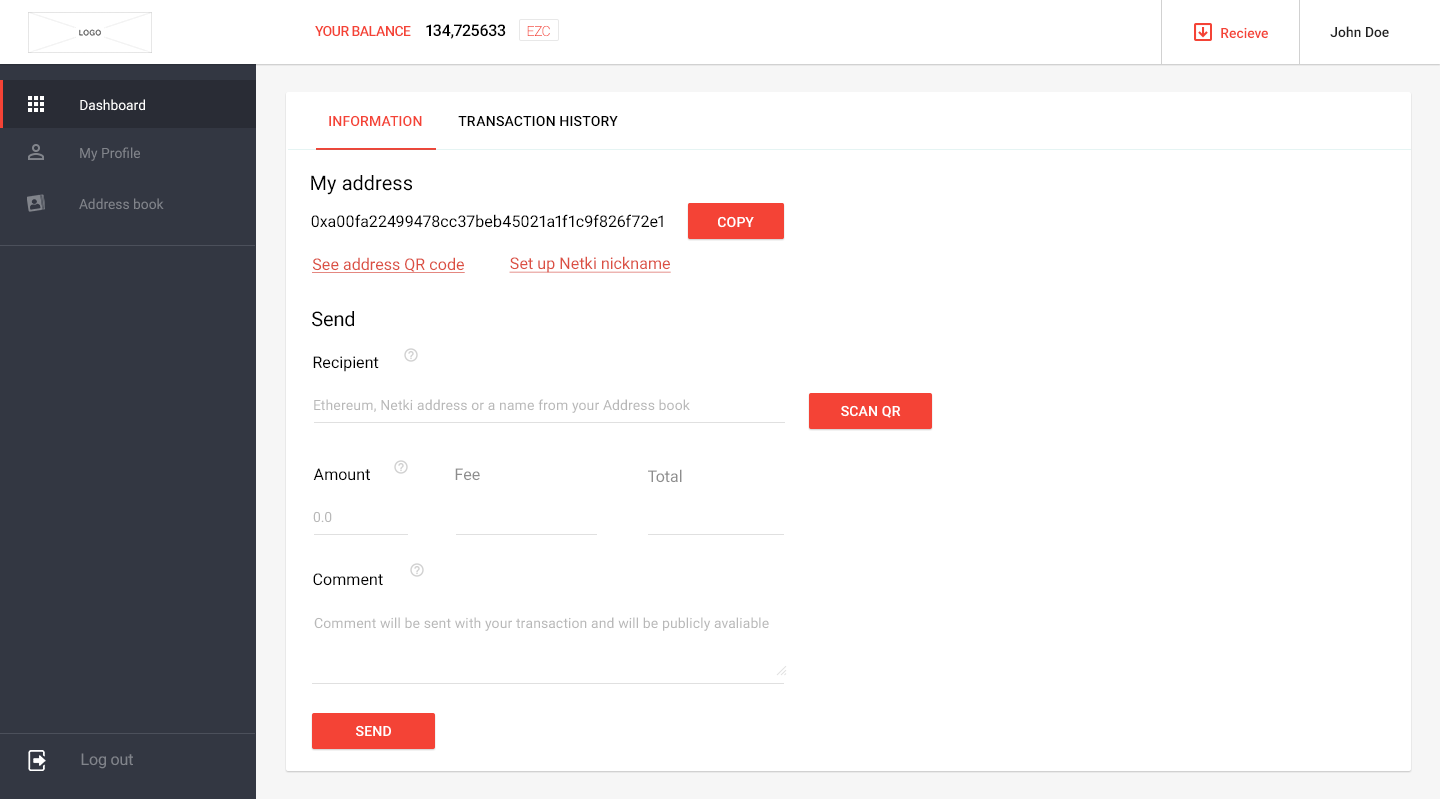
<style>
.page{position:relative;width:1440px;height:799px;background:#ffffff}
.page>*{position:absolute;margin:0}
.t1{font:14px "Roboto-Medium";letter-spacing:-0.04em;color:#f44336;text-transform:uppercase}
.t2{font:16px "Roboto-Medium";letter-spacing:-0.02em;color:#000000}
.t3{font:14px "Roboto-Light";letter-spacing:-0.04em;color:#f44336}
.t4{font:14px "Roboto-Medium";color:#f44336}
.t5{font:14px "Roboto-Medium";color:#212121}
.t6{font:14px "Roboto-Regular";color:#ffffff}
.t7{font:14px "Roboto-Medium";letter-spacing:0.01em;color:#f44336;text-transform:uppercase}
.t8{font:14px "Roboto-Medium";letter-spacing:0.01em;color:#000000;text-transform:uppercase}
.t9{font:14px "Roboto-Regular";color:#81848b}
.t10{font:20px "Roboto-Regular";letter-spacing:0.005em;color:#000000}
.t11{font:16px "Roboto-Regular";letter-spacing:0.005em;color:#000000}
.t12{font:14px "Roboto-Medium";letter-spacing:0.01em;color:#ffffff;text-transform:uppercase}
.t13{font:16px "Roboto-Regular";letter-spacing:0.005em;color:#db4f42;text-decoration:underline}
.t14{font:20px "Roboto-Regular";letter-spacing:-0.01em;color:#000000}
.t15{font:14px "Roboto-Regular";letter-spacing:0.01em;color:#b8b8b8}
.t16{font:16px "Roboto-Regular";letter-spacing:0.005em;color:#8d8d8d}
.t17{font:16px "Roboto-Regular";letter-spacing:-0.011em;color:#81848b}
</style>
<div class="page">
<p class="t1" style="left:315px;top:25px;width:96px;height:12px">Your balance</p>
<p class="t2" style="left:426px;top:24px;width:80px;height:15px">134,725633</p>
<p class="t3" style="left:527px;top:25px;width:23px;height:12px">EZC</p>
<p class="t4" style="left:1221px;top:27px;width:47px;height:12px">Recieve</p>
<p class="t5" style="left:1330px;top:26px;width:59px;height:12px">John Doe</p>
<p class="t6" style="left:80px;top:99px;width:65px;height:12px">Dashboard</p>
<p class="t7" style="left:329px;top:115px;width:93px;height:12px">Information</p>
<p class="t8" style="left:458px;top:115px;width:160px;height:12px">Transaction history</p>
<p class="t9" style="left:80px;top:147px;width:60px;height:14px">My Profile</p>
<p class="t10" style="left:311px;top:175px;width:101px;height:20px">My address</p>
<p class="t9" style="left:79px;top:198px;width:85px;height:12px">Address book</p>
<p class="t11" style="left:311px;top:214px;width:352px;height:14px">0xa00fa22499478cc37beb45021a1f1c9f826f72e1</p>
<p class="t12" style="left:718px;top:216px;width:36px;height:12px">Copy</p>
<p class="t13" style="left:312px;top:257px;width:153px;height:16px">See address QR code</p>
<p class="t13" style="left:509px;top:256px;width:162px;height:17px">Set up Netki nickname</p>
<p class="t14" style="left:312px;top:311px;width:42px;height:16px">Send</p>
<p class="t11" style="left:313px;top:356px;width:66px;height:16px">Recipient</p>
<p class="t15" style="left:314px;top:399px;width:376px;height:14px">Ethereum, Netki address or a name from your Address book</p>
<p class="t12" style="left:841px;top:405px;width:60px;height:13px">Scan Qr</p>
<p class="t11" style="left:313px;top:468px;width:57px;height:13px">Amount</p>
<p class="t16" style="left:455px;top:468px;width:25px;height:13px">Fee</p>
<p class="t16" style="left:648px;top:469px;width:34px;height:14px">Total</p>
<p class="t15" style="left:313px;top:511px;width:19px;height:12px">0.0</p>
<p class="t11" style="left:313px;top:573px;width:70px;height:13px">Comment</p>
<p class="t15" style="left:314px;top:617px;width:455px;height:14px">Comment will be sent with your transaction and will be publicly avaliable</p>
<p class="t12" style="left:356px;top:725px;width:35px;height:12px">send</p>
<p class="t17" style="left:81px;top:753px;width:52px;height:16px">Log out</p>
</div>
